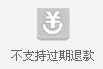
<style>
.page{position:relative;width:103px;height:69px;background:#f4f4f4}
.page>*{position:absolute;margin:0}
.t1{font:12px "SimSun";color:#656668}
</style>
<div class="page">
<p class="t1" style="left:11px;top:50px;width:83px;height:11px">不支持过期退款</p>
</div>
